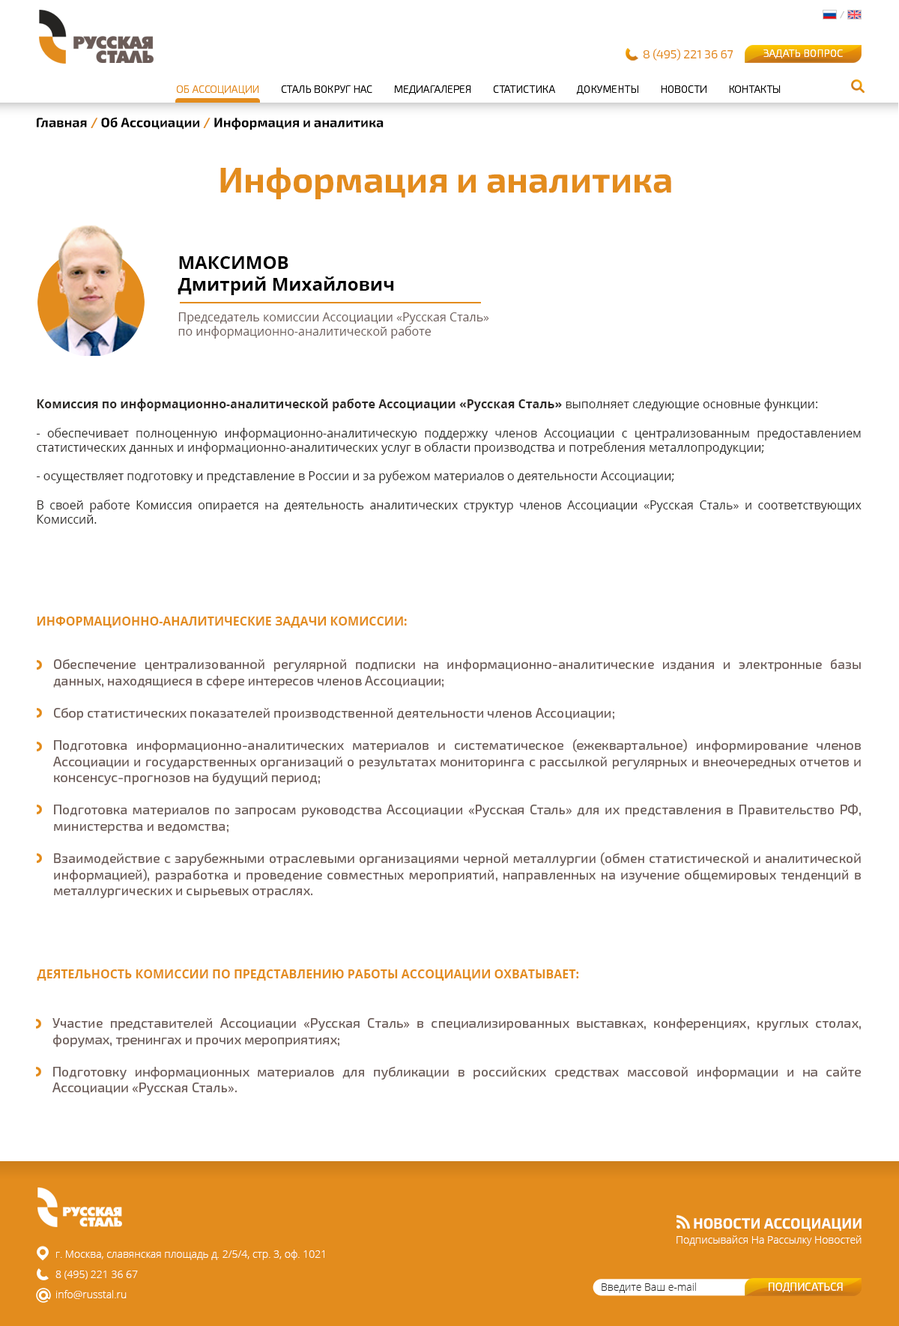
<style>
.page{position:relative;width:899px;height:1326px;background:#ffffff}
.page>*{position:absolute;margin:0}
.t1{font:9px "Exo2.0-Medium";color:#c3c3c3}
.t2{font:12px "Exo2.0-Light";color:#e38c1d}
.t3{font:10.6px "Exo2.0-Light";color:#ffffff}
.t4{font:10.5px "Exo2.0-Light";color:#000000}
.t5{font:10.5px "Exo2.0-Light";color:#e38c1d}
.t6{font:13.5px "Exo2.0-Bold";color:#000000}
.t7{font:13.5px "Exo2.0-Bold";color:#e38c1d}
.t8{font:36px "Exo2.0-Bold";color:#e38c1d}
.t9{font:18px "OpenSans-Bold";color:#000000}
.t10{font:18px "OpenSans-Bold";color:#000000;text-transform:uppercase}
.t11{font:12px "OpenSans";color:#6b5c58}
.t12{font:12px "OpenSans";color:#2e2b28}
.t13{font:12px "OpenSans-Bold";color:#2e2b28}
.t14{font:12px "OpenSans-Bold";color:#e38c1d;text-transform:uppercase}
.t15{font:13.5px "Exo2.0-Regular";color:#6b5c58}
.t16{font:14.7px "Exo2.0-Bold";color:#ffffff}
.t17{font:10.5px "OpenSans-Light";color:#ffffff}
.t18{font:10.5px/20.2px "OpenSans-Light";color:#ffffff}
.t19{font:10.5px "OpenSans-Light";color:#252422}
.t20{font:11.1px "Exo2.0-Light";color:#ffffff}
</style>
<div class="page">
<p class="t1" style="left:840px;top:11px;width:4px;height:8px">/</p>
<p class="t2" style="left:644px;top:49px;width:90px;height:12px">8 (495) 221 36 67</p>
<p class="t3" style="left:764px;top:49px;width:79px;height:10px">ЗАДАТЬ ВОПРОС</p>
<p class="t4" style="left:176px;top:85px;width:605px;height:10px"><span class="t5">ОБ АССОЦИАЦИИ</span>         СТАЛЬ ВОКРУГ НАС         МЕДИАГАЛЕРЕЯ         СТАТИСТИКА         ДОКУМЕНТЫ         НОВОСТИ         КОНТАКТЫ</p>
<p class="t6" style="left:37px;top:117px;width:347px;height:13px">Главная <span class="t7">/ </span>Об Ассоциации <span class="t7">/ </span>Информация и аналитика</p>
<p class="t8" style="left:220px;top:167px;width:451px;height:32px">Информация и аналитика</p>
<p class="t9" style="left:178px;top:256px;width:216px;height:39px"><span class="t10">Максимов<br></span>Дмитрий Михайлович</p>
<p class="t11" style="left:178px;top:312px;width:311px;height:27px">Председатель комиссии Ассоциации «Русская Сталь»<br>по информационно-аналитической работе</p>
<p class="t12" style="left:37px;top:399px;width:825px;height:125px;text-align:justify"><span class="t13">Комиссия по информационно-аналитической работе Ассоциации «Русская Cталь»</span> выполняет следующие основные функции:<br><br>- обеспечивает полноценную информационно-аналитическую поддержку членов Ассоциации с централизованным предоставлением статистических данных и информационно-аналитических услуг в области производства и потребления металлопродукции;<br><br>- осуществляет подготовку и представление в России и за рубежом материалов о деятельности Ассоциации;<br><br>В своей работе Комиссия опирается на деятельность аналитических структур членов Ассоциации «Русская Сталь» и соответствующих Комиссий.</p>
<p class="t14" style="left:37px;top:617px;width:370px;height:11px">Информационно-аналитические задачи Комиссии:</p>
<p class="t15" style="left:53px;top:659px;width:808px;height:239px;text-align:justify">Обеспечение централизованной регулярной подписки на информационно-аналитические издания и электронные базы данных, находящиеся в сфере интересов членов Ассоциации;<br><br>Сбор статистических показателей производственной деятельности членов Ассоциации;<br><br>Подготовка информационно-аналитических материалов и систематическое (ежеквартальное) информирование членов Ассоциации и государственных организаций о результатах мониторинга с рассылкой регулярных и внеочередных отчетов и консенсус-прогнозов на будущий период;<br><br>Подготовка материалов по запросам руководства Ассоциации «Русская Сталь» для их представления в Правительство РФ, министерства и ведомства;<br><br>Взаимодействие с зарубежными отраслевыми организациями черной металлургии (обмен статистической и аналитической информацией), разработка и проведение совместных мероприятий, направленных на изучение общемировых тенденций в металлургических и сырьевых отраслях.</p>
<p class="t14" style="left:37px;top:970px;width:542px;height:11px">Деятельность Комиссии по представлению работы Ассоциации охватывает:</p>
<p class="t15" style="left:52px;top:1018px;width:809px;height:77px;text-align:justify">Участие представителей Ассоциации «Русская Сталь» в специализированных выставках, конференциях, круглых столах, форумах, тренингах и прочих мероприятиях;<br><br>Подготовку информационных материалов для публикации в российских средствах массовой информации и на сайте Ассоциации «Русская Сталь».</p>
<p class="t16" style="left:694px;top:1218px;width:168px;height:13px">НОВОСТИ АССОЦИАЦИИ</p>
<p class="t17" style="left:677px;top:1236px;width:185px;height:10px">Подписывайся На Рассылку Новостей</p>
<p class="t18" style="left:55px;top:1250px;width:269px;height:49px">г. Москва, славянская площадь д. 2/5/4, стр. 3, оф. 1021<br>8 (495) 221 36 67<br>info@russtal.ru</p>
<p class="t19" style="left:602px;top:1283px;width:94px;height:10px">Введите Ваш e-mail</p>
<p class="t20" style="left:769px;top:1283px;width:74px;height:9px">ПОДПИСАТЬСЯ</p>
</div>
